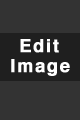
<style>
.page{position:relative;width:80px;height:120px;background:#333333}
.page>*{position:absolute;margin:0}
.t1{font:18px "Helvetica-Bold";letter-spacing:0.08em;color:#ffffff;font-weight:bold}
</style>
<div class="page">
<p class="t1" style="left:20px;top:39px;width:39px;height:14px">Edit</p>
<p class="t1" style="left:11px;top:59px;width:59px;height:17px">Image</p>
</div>
